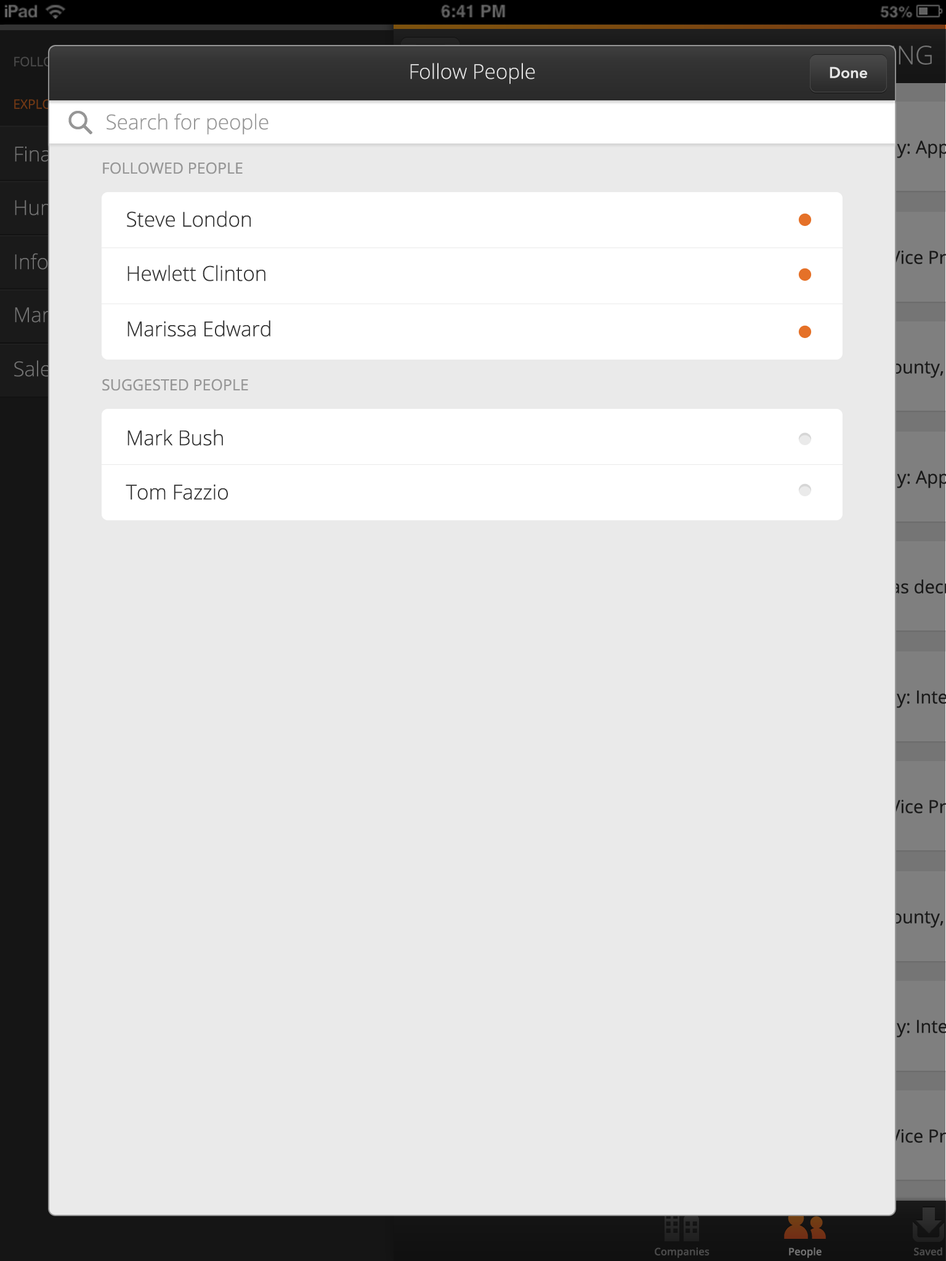
<style>
.page{position:relative;width:946px;height:1261px;background:#eaeaea}
.page>*{position:absolute;margin:0}
.t1{font:20.5px "OpenSans-Light";color:#e5e5e5}
.t2{font:15.4px "AvenirNext-DemiBold";color:#e5e5e5}
.t3{font:20.5px "OpenSans-Light";color:#969696}
.t4{font:15.4px "OpenSans";color:#969696}
.t5{font:20.5px "OpenSans-Light";color:#343434}
</style>
<div class="page">
<p class="t1" style="left:410px;top:63px;width:125px;height:21px">Follow People</p>
<p class="t2" style="left:829px;top:66px;width:38px;height:12px">Done</p>
<p class="t3" style="left:107px;top:113px;width:161px;height:22px">Search for people</p>
<p class="t4" style="left:103px;top:162px;width:140px;height:12px">FOLLOWED PEOPLE</p>
<p class="t5" style="left:127px;top:211px;width:124px;height:16px">Steve London</p>
<p class="t5" style="left:127px;top:265px;width:138px;height:16px">Hewlett Clinton</p>
<p class="t5" style="left:127px;top:320px;width:143px;height:17px">Marissa Edward</p>
<p class="t4" style="left:102px;top:379px;width:146px;height:12px">SUGGESTED PEOPLE</p>
<p class="t5" style="left:127px;top:429px;width:96px;height:17px">Mark Bush</p>
<p class="t5" style="left:126px;top:484px;width:102px;height:16px">Tom Fazzio</p>
</div>
